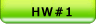
<style>
.page{position:relative;width:96px;height:24px}
.page>*{position:absolute;margin:0}
.t1{font:12px "Verdana";letter-spacing:0.055em;color:#000000;font-weight:bold}
</style>
<div class="page">
<p class="t1" style="left:32px;top:7px;width:40px;height:10px">HW#1</p>
</div>
